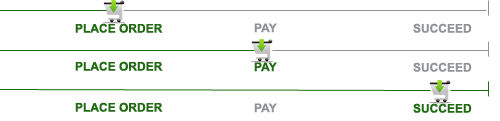
<style>
.page{position:relative;width:500px;height:121px;background:#ffffff}
.page>*{position:absolute;margin:0}
.t1{font:12px "Arial-BoldMT";color:#226b14}
.t2{font:12px "Arial-BoldMT";color:#909496}
</style>
<div class="page">
<p class="t1" style="left:75px;top:23px;width:88px;height:10px">PLACE ORDER</p>
<p class="t2" style="left:254px;top:23px;width:23px;height:10px">PAY</p>
<p class="t2" style="left:413px;top:23px;width:59px;height:10px">SUCCEED</p>
<p class="t1" style="left:75px;top:61px;width:88px;height:10px">PLACE ORDER</p>
<p class="t1" style="left:254px;top:62px;width:23px;height:10px">PAY</p>
<p class="t2" style="left:413px;top:62px;width:59px;height:10px">SUCCEED</p>
<p class="t1" style="left:75px;top:102px;width:88px;height:10px">PLACE ORDER</p>
<p class="t2" style="left:254px;top:103px;width:23px;height:10px">PAY</p>
<p class="t1" style="left:413px;top:103px;width:59px;height:10px">SUCCEED</p>
</div>
